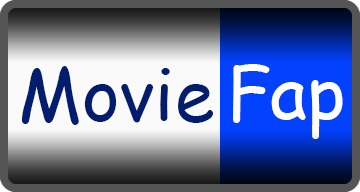
<style>
.page{position:relative;width:360px;height:192px}
.page>*{position:absolute;margin:0}
.t1{font:72px "ComicSansMS";color:#fffefe}
.t2{font:72px "ComicSansMS";color:#031d6e}
</style>
<div class="page">
<p class="t1" style="left:233px;top:64px;width:110px;height:75px">Fap</p>
<p class="t2" style="left:21px;top:66px;width:192px;height:59px">Movie</p>
</div>
